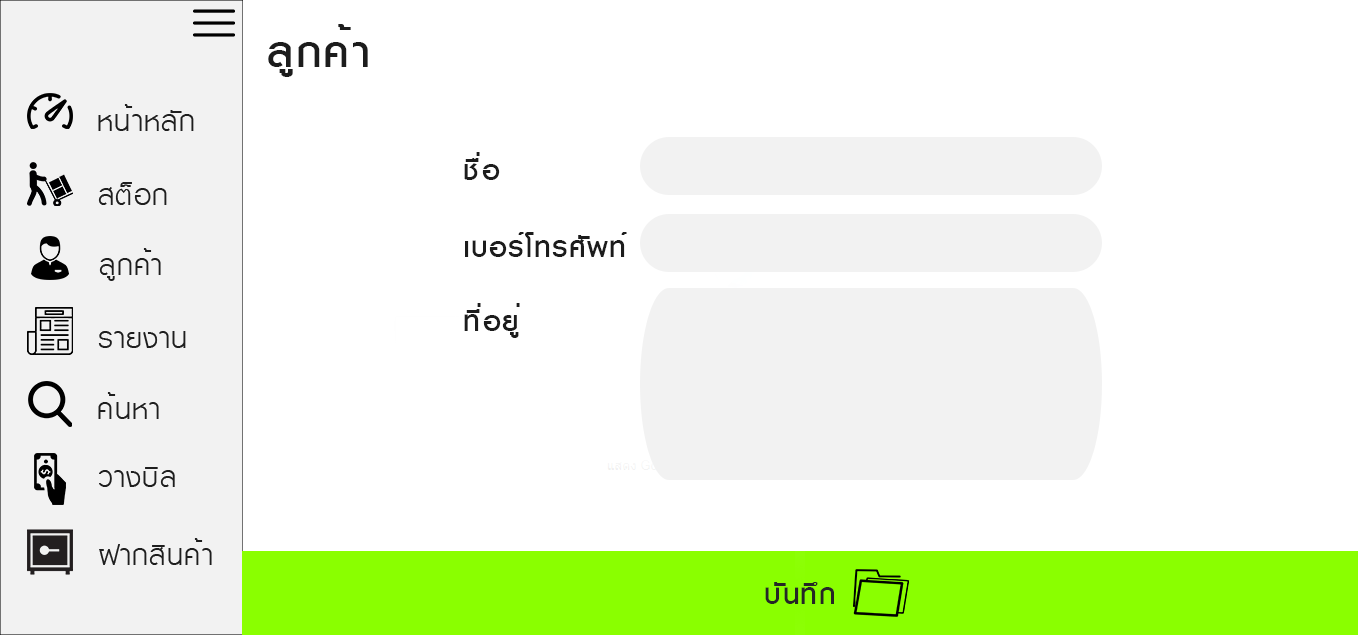
<style>
.page{position:relative;width:1358px;height:635px;background:#ffffff}
.page>*{position:absolute;margin:0}
.t1{font:61.6px "KittithadaMedium65P";letter-spacing:0.025em;color:#1c1c1c}
.t2{font:40px "KittithadaMedium65P";letter-spacing:0.025em;color:#1c1c1c}
.t3{font:40px "KittithadaMedium65P";letter-spacing:0.025em;color:#262626}
</style>
<div class="page">
<p class="t1" style="left:268px;top:24px;width:100px;height:53px">ลูกค้า</p>
<p class="t2" style="left:464px;top:152px;width:36px;height:28px">ชื่อ</p>
<p class="t2" style="left:465px;top:232px;width:162px;height:25px">เบอร์โทรศัพท์</p>
<p class="t2" style="left:464px;top:303px;width:56px;height:35px">ที่อยู่</p>
<p class="t3" style="left:765px;top:582px;width:69px;height:22px">บันทึก</p>
</div>
